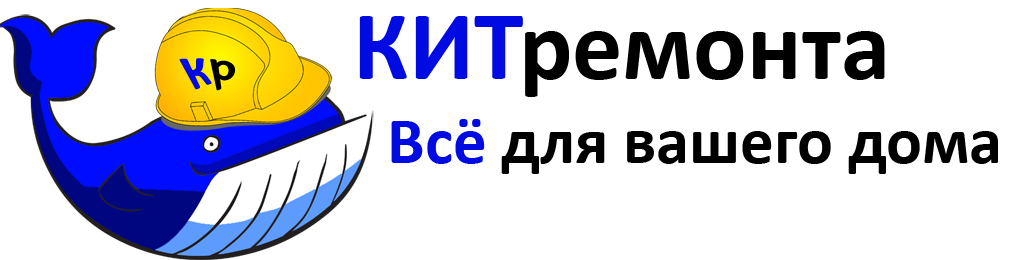
<style>
.page{position:relative;width:1018px;height:260px;background:#ffffff}
.page>*{position:absolute;margin:0}
.t1{font:100px "Calibri-Bold";color:#000000}
.t2{font:100px "Calibri-Bold";color:#000be2}
.t3{font:41.7px "Calibri-Bold";color:#000be2}
.t4{font:41.7px "Calibri-Bold";color:#000000}
.t5{font:66.7px "Calibri-Bold";color:#000000}
.t6{font:66.7px "Calibri-Bold";color:#000be2}
</style>
<div class="page">
<p class="t1" style="left:359px;top:16px;width:526px;height:81px"><span class="t2">КИТ</span>ремонта</p>
<p class="t3" style="left:179px;top:58px;width:56px;height:33px">к<span class="t4">р</span></p>
<p class="t5" style="left:391px;top:119px;width:607px;height:55px"><span class="t6">Всё </span>для вашего дома</p>
</div>
